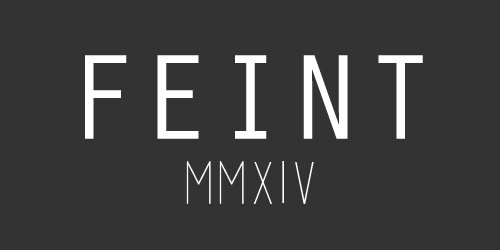
<style>
.page{position:relative;width:500px;height:250px;background:#333333}
.page>*{position:absolute;margin:0}
.t1{font:125px "OratorStd";color:#ffffff}
.t2{font:58.3px "basicl";color:#ffffff}
</style>
<div class="page">
<p class="t1" style="left:85px;top:55px;width:338px;height:84px">FEINT</p>
<p class="t2" style="left:186px;top:161px;width:128px;height:43px">MMXIV</p>
</div>
